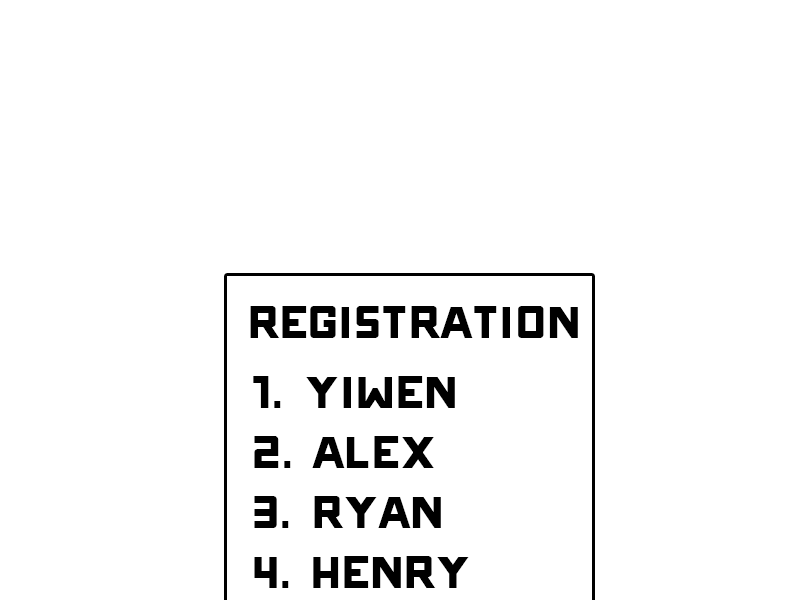
<style>
.page{position:relative;width:800px;height:600px;background:#ffffff}
.page>*{position:absolute;margin:0}
.t1{font:72px "ONRAMP";color:#000000}
.t2{font:72px/60px "ONRAMP";color:#000000}
</style>
<div class="page">
<p class="t1" style="left:250px;top:306px;width:328px;height:32px">Registration</p>
<p class="t2" style="left:253px;top:376px;width:216px;height:212px"><span class="t1">1</span>. Yiwen<br>2. Alex<br>3. Ryan<br>4. Henry</p>
</div>
